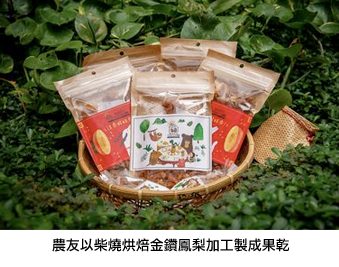
<style>
.page{position:relative;width:339px;height:267px}
.page>*{position:absolute;margin:0}
.t1{font:14px "LiHeiPro";color:#000000}
</style>
<div class="page">
<p class="t1" style="left:52px;top:238px;width:238px;height:14px">農友以柴燒烘焙金鑽鳳梨加工製成果乾</p>
</div>
